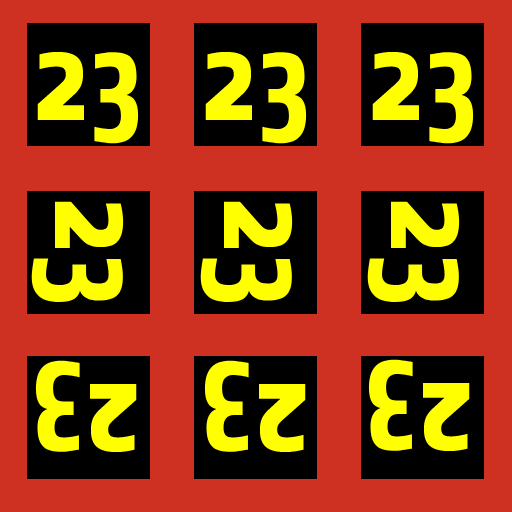
<style>
.page{position:relative;width:512px;height:512px;background:#ce3122}
.page>*{position:absolute;margin:0}
.t1{font:130px "Share-BoldOSF";color:#ffff00}
</style>
<div class="page">
<p class="t1" style="left:37px;top:51px;width:102px;height:93px">23</p>
<p class="t1" style="left:205px;top:51px;width:102px;height:93px">23</p>
<p class="t1" style="left:372px;top:51px;width:102px;height:93px">23</p>
<p class="t1" style="left:31px;top:201px;width:93px;height:102px;rotate:90deg">23</p>
<p class="t1" style="left:200px;top:201px;width:93px;height:102px;rotate:90deg">23</p>
<p class="t1" style="left:367px;top:201px;width:93px;height:102px;rotate:90deg">23</p>
<p class="t1" style="left:35px;top:360px;width:102px;height:93px;rotate:-180deg">23</p>
<p class="t1" style="left:204px;top:360px;width:102px;height:93px;rotate:-180deg">23</p>
<p class="t1" style="left:368px;top:359px;width:102px;height:93px;rotate:-180deg">23</p>
</div>
